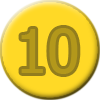
<style>
.page{position:relative;width:100px;height:100px;background:#ffd926}
.page>*{position:absolute;margin:0}
.t1{font:60px "Tahoma";color:#b3981b}
</style>
<div class="page">
<p class="t1" style="left:21px;top:28px;width:57px;height:46px">10</p>
</div>
